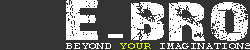
<style>
.page{position:relative;width:250px;height:50px;background:#333333}
.page>*{position:absolute;margin:0}
.t1{font:57.2px "28-Days-Later-Regular";color:#ffffff;scale:1.49 1}
.t2{font:8.8px "CourierNewPSMT";color:#ffffff;scale:1.48 1}
.t3{font:8.8px "CourierNewPSMT";color:#d8f800;scale:1.48 1}
</style>
<div class="page">
<p class="t1" style="left:66px;top:0px;width:182px;height:41px">E-bro</p>
<p class="t2" style="left:66px;top:43px;width:185px;height:6px">BEYOND <span class="t3">YOUR </span>IMAGINATIONS</p>
</div>
